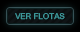
<style>
.page{position:relative;width:80px;height:32px}
.page>*{position:absolute;margin:0}
.t1{font:8px "MicrosoftSansSerif";color:#40a0a2}
</style>
<div class="page">
<p class="t1" style="left:15px;top:13px;width:50px;height:7px">VER FLOTAS</p>
</div>
